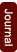
<style>
.page{position:relative;width:17px;height:52px;background:#650701}
.page>*{position:absolute;margin:0}
.t1{font:11px "ArialMT";letter-spacing:0.025em;color:#ffffff}
</style>
<div class="page">
<p class="t1" style="left:4px;top:9px;width:9px;height:37px;rotate:90deg">Journal</p>
</div>
